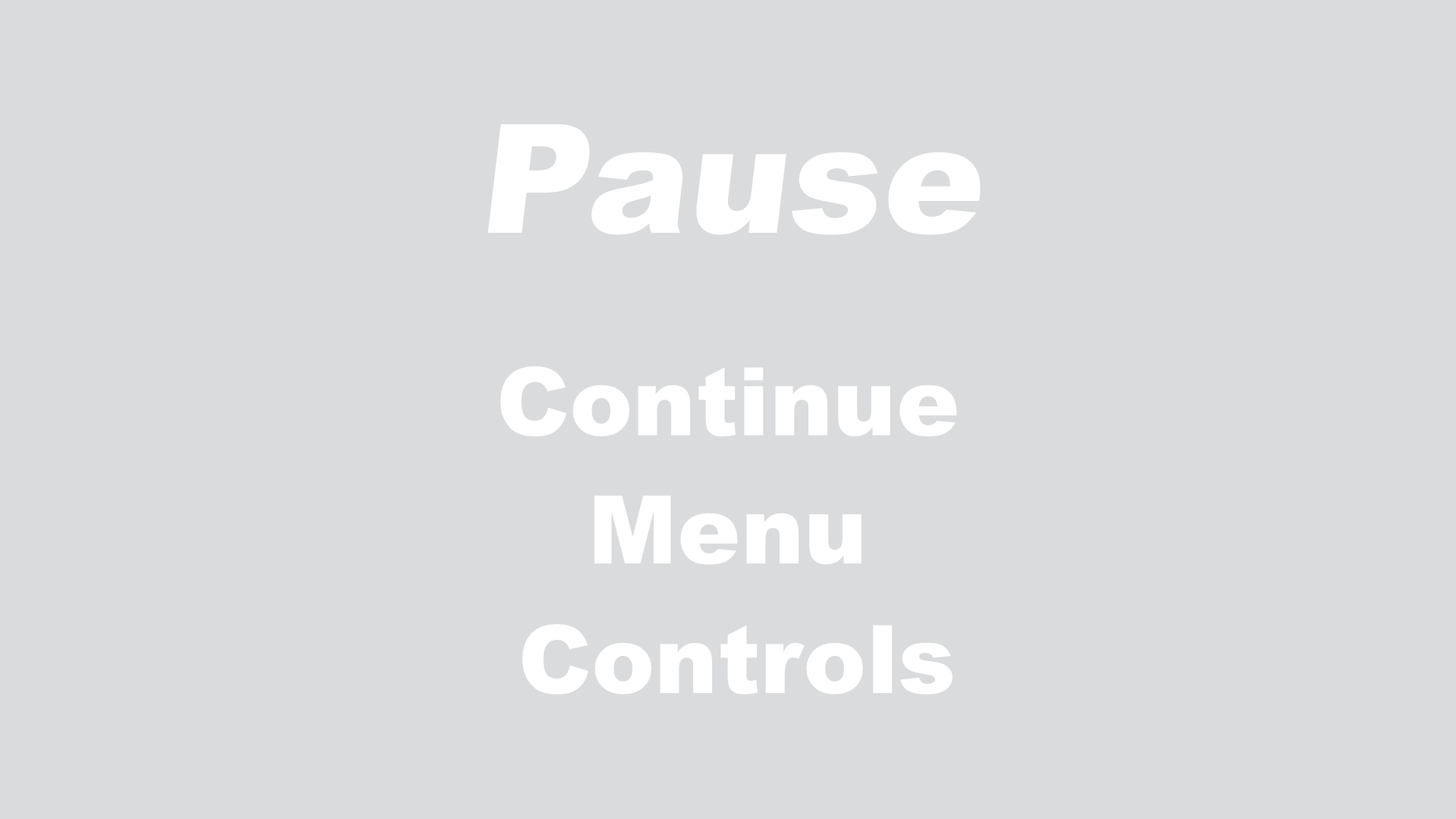
<style>
.page{position:relative;width:1456px;height:819px;background:#dadbdc}
.page>*{position:absolute;margin:0}
.t1{font:152.7px "Arial-Black";color:#ffffff}
.t2{font:94.8px "Arial-Black";color:#ffffff}
</style>
<div class="page">
<p class="t1" style="left:488px;top:124px;width:493px;height:111px">Pause</p>
<p class="t2" style="left:500px;top:366px;width:457px;height:71px">Continue</p>
<p class="t2" style="left:594px;top:495px;width:267px;height:70px">Menu</p>
<p class="t2" style="left:522px;top:624px;width:430px;height:71px">Controls</p>
</div>
